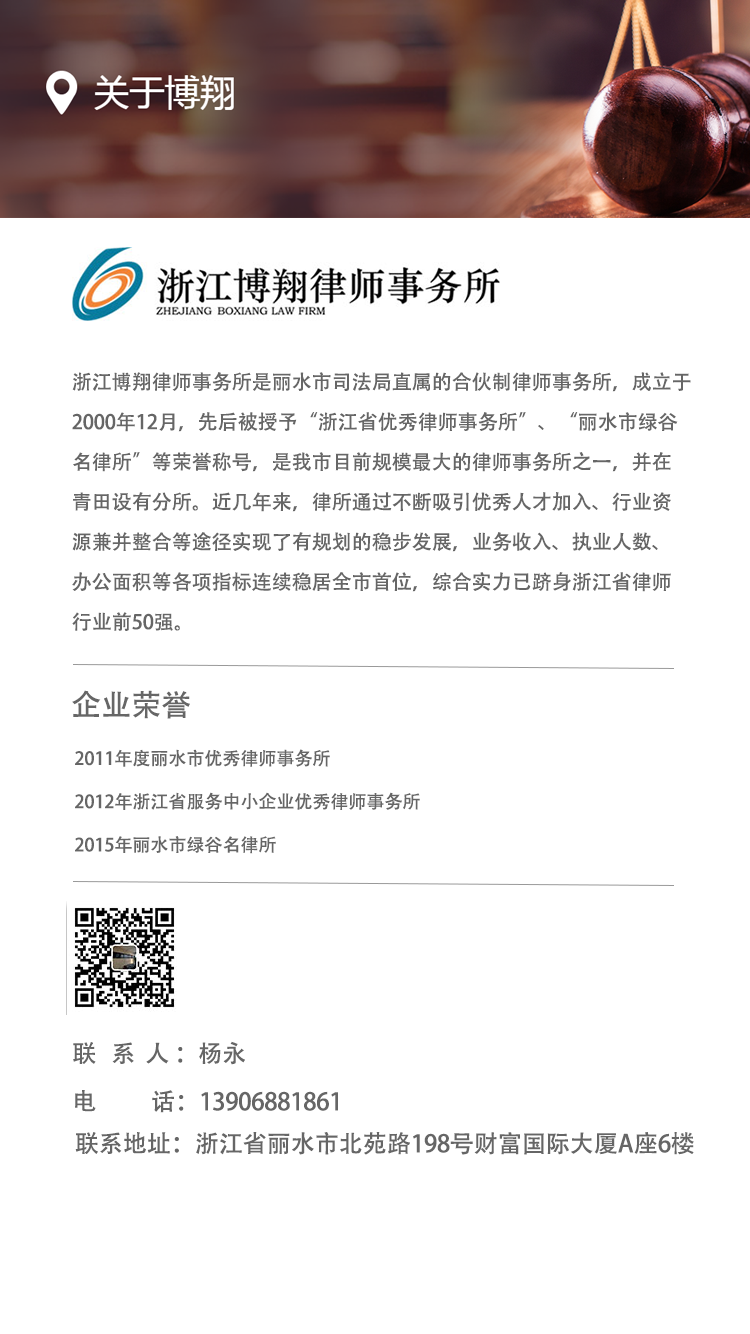
<style>
.page{position:relative;width:750px;height:1334px;background:#ffffff}
.page>*{position:absolute;margin:0}
.t1{font:20px/40px "AdobeHeitiStd-Regular";color:#666666}
.t2{font:30px "AdobeHeitiStd-Regular";color:#666666}
.t3{font:18px "AdobeHeitiStd-Regular";color:#666666}
.t4{font:24px "AdobeHeitiStd-Regular";color:#666666}
</style>
<div class="page">
<p class="t1" style="left:72px;top:372px;width:619px;height:259px">浙江博翔律师事务所是丽水市司法局直属的合伙制律师事务所，成立于<br>2000年12月，先后被授予“浙江省优秀律师事务所”、“丽水市绿谷<br>名律所”等荣誉称号，是我市目前规模最大的律师事务所之一，并在<br>青田设有分所。近几年来，律所通过不断吸引优秀人才加入、行业资<br>源兼并整合等途径实现了有规划的稳步发展，业务收入、执业人数、<br>办公面积等各项指标连续稳居全市首位，综合实力已跻身浙江省律师<br>行业前50强。</p>
<p class="t2" style="left:72px;top:690px;width:118px;height:29px">企业荣誉</p>
<p class="t3" style="left:75px;top:749px;width:345px;height:105px">2011年度丽水市优秀律师事务所<br><br>    2012年浙江省服务中小企业优秀律师事务所<br><br>    2015年丽水市绿谷名律所</p>
<p class="t4" style="left:73px;top:1041px;width:172px;height:24px">联   系  人 ：杨永</p>
<p class="t4" style="left:75px;top:1090px;width:263px;height:23px">电           话：13906881861</p>
<p class="t4" style="left:75px;top:1132px;width:619px;height:23px">联系地址：浙江省丽水市北苑路198号财富国际大厦A座6楼</p>
</div>
